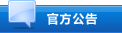
<style>
.page{position:relative;width:122px;height:33px}
.page>*{position:absolute;margin:0}
.t1{font:12px "MicrosoftYaHei";letter-spacing:0.075em;color:#ffffff}
</style>
<div class="page">
<p class="t1" style="left:47px;top:13px;width:50px;height:12px">官方公告</p>
</div>
